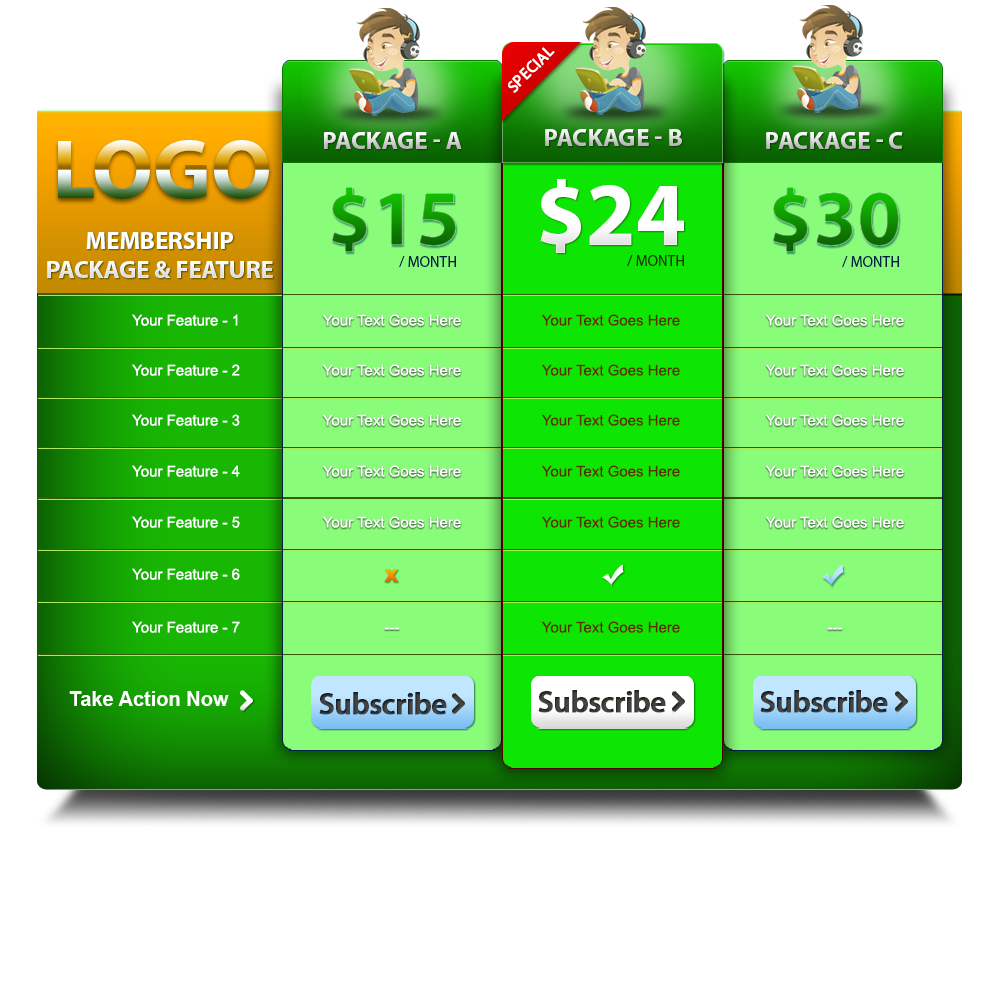
<style>
.page{position:relative;width:1000px;height:1000px;background:#ffffff}
.page>*{position:absolute;margin:0}
.t1{font:16px "MyriadPro-Regular";color:#ffffff;font-weight:bold}
.t2{font:25px "MyriadPro-Bold";text-transform:uppercase}
.t3{font:84.9px "MyriadPro-Bold";text-transform:uppercase}
.t4{font:90px "MyriadPro-Bold";color:#ffffff;text-transform:uppercase}
.t5{font:80px "MyriadPro-Bold";text-transform:uppercase}
.t6{font:24.5px "MyriadPro-Bold";color:#fcfcfc;text-transform:uppercase}
.t7{font:15px "MyriadPro-Regular";color:#001c40;text-transform:uppercase}
.t8{font:15px "MyriadPro-Regular";color:#1a3c00;text-transform:uppercase}
.t9{font:15px "ArialMT";color:#ffffff}
.t10{font:15px "ArialMT";color:#553000}
.t11{font:15px "ArialMT";color:#fefefe}
.t12{font:18px "Arial-Black";text-transform:uppercase}
.t13{font:20px "Arial-BoldMT";color:#ffffff}
.t14{font:30px "MyriadPro-Semibold";letter-spacing:-0.025em;color:#38393c;font-weight:bold}
.t15{font:30px "MyriadPro-Semibold";letter-spacing:-0.025em;color:#3a3d38;font-weight:bold}
</style>
<div class="page">
<p class="t1" style="left:508px;top:47px;width:47px;height:46px;rotate:-45deg">SPECIAL</p>
<p class="t2" style="left:324px;top:132px;width:138px;height:17px">Package - A</p>
<p class="t2" style="left:545px;top:129px;width:137px;height:17px">package - b</p>
<p class="t2" style="left:766px;top:132px;width:137px;height:17px">package - c</p>
<p class="t3" style="left:58px;top:140px;width:211px;height:59px">logo</p>
<p class="t4" style="left:540px;top:179px;width:144px;height:74px">$24</p>
<p class="t5" style="left:331px;top:187px;width:125px;height:65px">$15</p>
<p class="t5" style="left:772px;top:187px;width:127px;height:65px">$30</p>
<p class="t6" style="left:47px;top:232px;width:226px;height:46px;text-align:center">membership<br>package &amp; feature</p>
<p class="t7" style="left:399px;top:256px;width:57px;height:12px">/ month</p>
<p class="t8" style="left:627px;top:255px;width:57px;height:12px">/ month</p>
<p class="t7" style="left:842px;top:256px;width:57px;height:12px">/ month</p>
<p class="t9" style="left:132px;top:314px;width:106px;height:12px">Your Feature - 1</p>
<p class="t9" style="left:322px;top:314px;width:139px;height:12px">Your Text Goes Here</p>
<p class="t10" style="left:541px;top:314px;width:139px;height:12px">Your Text Goes Here</p>
<p class="t9" style="left:765px;top:314px;width:139px;height:12px">Your Text Goes Here</p>
<p class="t9" style="left:132px;top:364px;width:108px;height:12px">Your Feature - 2</p>
<p class="t9" style="left:322px;top:364px;width:139px;height:12px">Your Text Goes Here</p>
<p class="t10" style="left:541px;top:364px;width:139px;height:12px">Your Text Goes Here</p>
<p class="t9" style="left:765px;top:364px;width:139px;height:12px">Your Text Goes Here</p>
<p class="t9" style="left:132px;top:414px;width:108px;height:12px">Your Feature - 3</p>
<p class="t9" style="left:322px;top:414px;width:139px;height:12px">Your Text Goes Here</p>
<p class="t10" style="left:541px;top:414px;width:139px;height:12px">Your Text Goes Here</p>
<p class="t9" style="left:765px;top:414px;width:139px;height:12px">Your Text Goes Here</p>
<p class="t9" style="left:132px;top:465px;width:108px;height:12px">Your Feature - 4</p>
<p class="t9" style="left:322px;top:465px;width:139px;height:12px">Your Text Goes Here</p>
<p class="t10" style="left:541px;top:465px;width:139px;height:12px">Your Text Goes Here</p>
<p class="t9" style="left:765px;top:465px;width:139px;height:12px">Your Text Goes Here</p>
<p class="t9" style="left:132px;top:516px;width:108px;height:12px">Your Feature - 5</p>
<p class="t9" style="left:322px;top:516px;width:139px;height:12px">Your Text Goes Here</p>
<p class="t10" style="left:541px;top:516px;width:139px;height:12px">Your Text Goes Here</p>
<p class="t9" style="left:765px;top:516px;width:139px;height:12px">Your Text Goes Here</p>
<p class="t11" style="left:132px;top:568px;width:108px;height:12px">Your Feature - 6</p>
<p class="t12" style="left:384px;top:569px;width:14px;height:13px">X</p>
<p class="t9" style="left:132px;top:621px;width:108px;height:12px">Your Feature - 7</p>
<p class="t9" style="left:384px;top:627px;width:16px;height:3px">---</p>
<p class="t10" style="left:541px;top:621px;width:139px;height:12px">Your Text Goes Here</p>
<p class="t9" style="left:827px;top:627px;width:16px;height:3px">---</p>
<p class="t13" style="left:69px;top:691px;width:160px;height:15px">Take Action Now</p>
<p class="t14" style="left:319px;top:692px;width:128px;height:23px">Subscribe</p>
<p class="t15" style="left:538px;top:690px;width:128px;height:23px">Subscribe</p>
<p class="t14" style="left:760px;top:690px;width:128px;height:23px">Subscribe</p>
</div>
